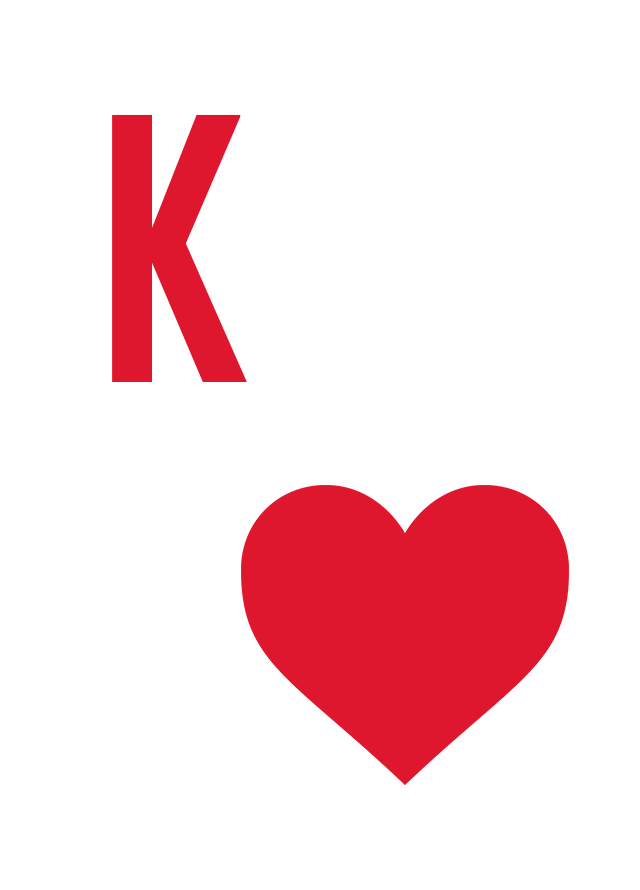
<style>
.page{position:relative;width:640px;height:890px;background:#ffffff}
.page>*{position:absolute;margin:0}
.t1{font:350px "AgencyFB-Bold";color:#df172e}
</style>
<div class="page">
<p class="t1" style="left:112px;top:114px;width:135px;height:268px">K</p>
</div>
